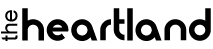
<style>
.page{position:relative;width:213px;height:49px;background:#ffffff}
.page>*{position:absolute;margin:0}
.t1{font:22.8px "ArialMT";color:#000000}
.t2{font:40.5px "Moderna";color:#000000}
</style>
<div class="page">
<p class="t1" style="left:1px;top:10px;width:17px;height:31px;rotate:-90deg">the</p>
<p class="t2" style="left:22px;top:8px;width:189px;height:33px">heartland</p>
</div>
